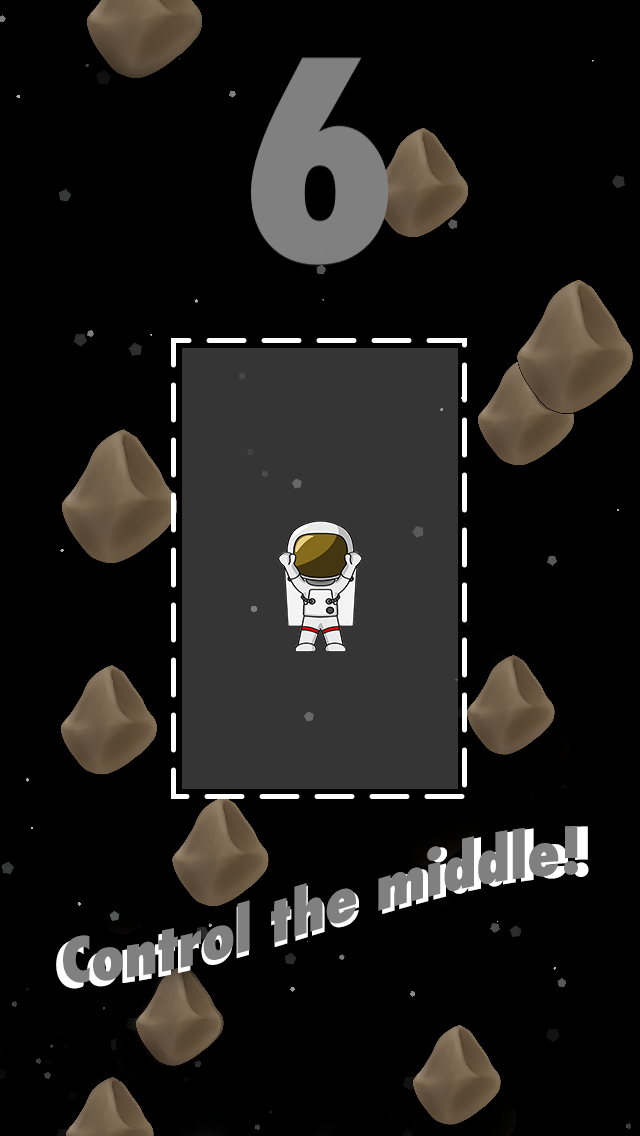
<style>
.page{position:relative;width:640px;height:1136px;background:#000000}
.page>*{position:absolute;margin:0}
.t1{font:62px "Futura-CondensedExtraBold"}
.t2{font:60px "Futura-CondensedExtraBold";color:#808080}
</style>
<div class="page">
<p class="t1" style="left:56px;top:826px;width:533px;height:163px">Control the middle!</p>
<p class="t2" style="left:63px;top:826px;width:515px;height:157px">Control the middle!</p>
</div>
